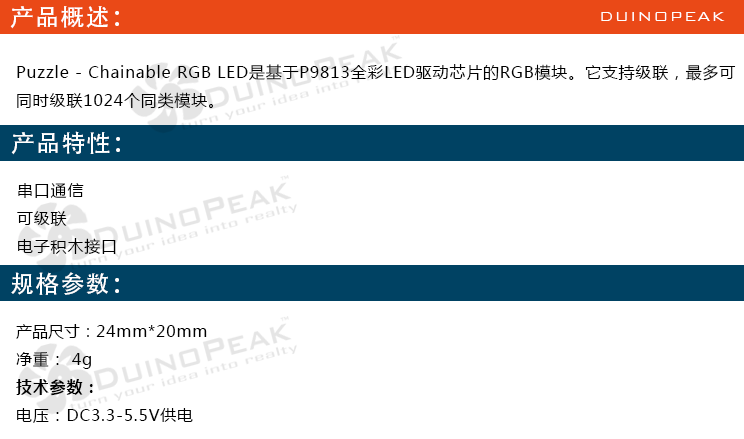
<style>
.page{position:relative;width:744px;height:439px;background:#ffffff}
.page>*{position:absolute;margin:0}
.t1{font:24px "AdobeHeitiStd-Regular";letter-spacing:0.05em;color:#ffffff}
.t2{font:18px "BankGothicBT-Light";letter-spacing:0.05em;color:#ffffff}
.t3{font:16px "MicrosoftYaHei";letter-spacing:0.05em;color:#000000}
.t4{font:16px "MicrosoftYaHei";color:#000000}
.t5{font:16px "MicrosoftYaHei-Bold";letter-spacing:0.05em;color:#000000}
</style>
<div class="page">
<p class="t1" style="left:10px;top:6px;width:109px;height:23px">产品概述：</p>
<p class="t2" style="left:601px;top:12px;width:124px;height:9px">DUINOPEAK</p>
<p class="t3" style="left:17px;top:64px;width:719px;height:45px">Puzzle - Chainable RGB LED是基于P9813全彩LED驱动芯片的RGB模块。它支持级联，最多可<br>同时级联1024个同类模块。</p>
<p class="t1" style="left:11px;top:131px;width:109px;height:24px">产品特性：</p>
<p class="t3" style="left:17px;top:183px;width:99px;height:71px">串口通信<br>可级联<br>电子积木接口</p>
<p class="t1" style="left:11px;top:272px;width:108px;height:23px">规格参数：</p>
<p class="t3" style="left:16px;top:324px;width:191px;height:99px"><span class="t4">产品尺寸：</span>24mm*20mm<br>净重： 4g<br><span class="t5">技术参数：<br></span>电压：DC3.3-5.5V供电</p>
</div>
